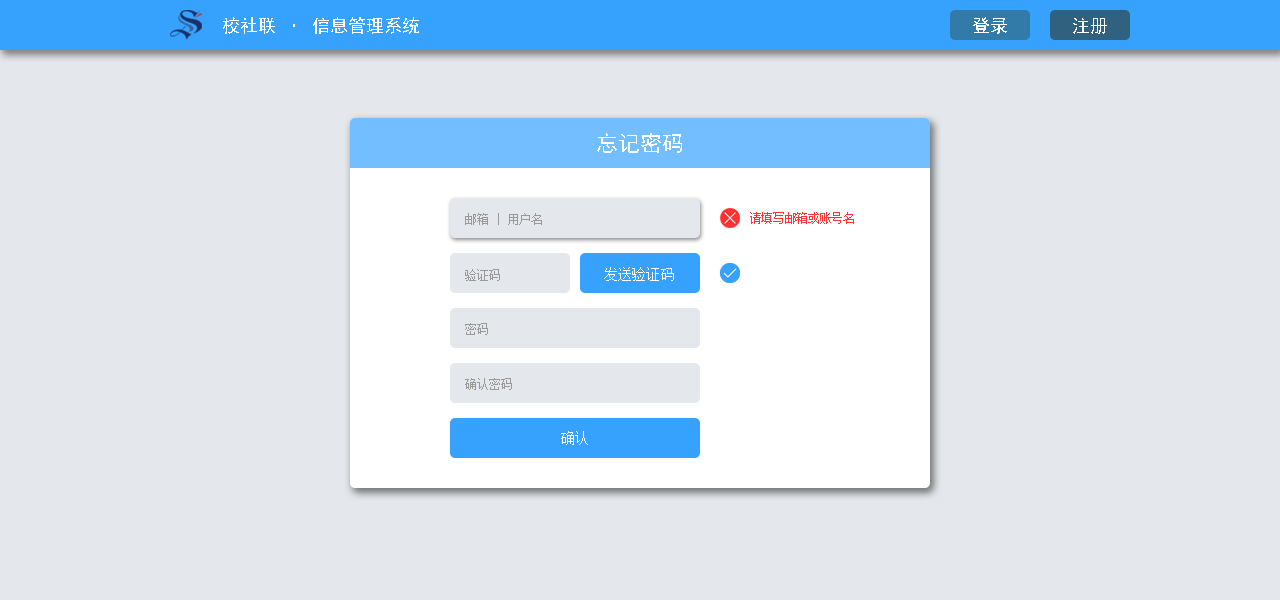
<style>
.page{position:relative;width:1280px;height:600px;background:#e4e8ec}
.page>*{position:absolute;margin:0}
.t1{font:18px "SimHei";color:#ffffff}
.t2{font:22px "SimHei";color:#ffffff}
.t3{font:12px "SimSun";color:#999999}
.t4{font:12px "SimSun";color:#ff3333}
.t5{font:14px "SimSun";color:#ffffff}
</style>
<div class="page">
<p class="t1" style="left:223px;top:17px;width:196px;height:17px">校社联 · 信息管理系统</p>
<p class="t1" style="left:973px;top:17px;width:34px;height:17px">登录</p>
<p class="t1" style="left:1073px;top:18px;width:34px;height:16px">注册</p>
<p class="t2" style="left:597px;top:133px;width:85px;height:20px">忘记密码</p>
<p class="t3" style="left:465px;top:213px;width:77px;height:12px">邮箱 | 用户名</p>
<p class="t4" style="left:750px;top:212px;width:104px;height:12px">请填写邮箱或账号名</p>
<p class="t3" style="left:465px;top:269px;width:35px;height:12px">验证码</p>
<p class="t5" style="left:604px;top:267px;width:70px;height:14px">发送验证码</p>
<p class="t3" style="left:465px;top:323px;width:23px;height:12px">密码</p>
<p class="t3" style="left:465px;top:378px;width:47px;height:12px">确认密码</p>
<p class="t5" style="left:561px;top:431px;width:27px;height:14px">确认</p>
</div>
